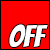
<style>
.page{position:relative;width:50px;height:50px;background:#ff0000}
.page>*{position:absolute;margin:0}
.t1{font:30px "Bangers-Regular";color:#ffffff}
</style>
<div class="page">
<p class="t1" style="left:9px;top:24px;width:39px;height:23px">off</p>
</div>
